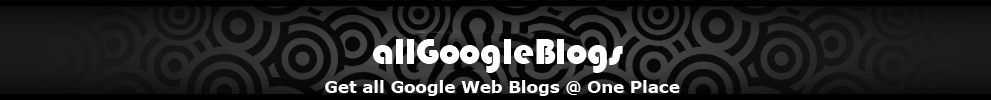
<style>
.page{position:relative;width:991px;height:100px}
.page>*{position:absolute;margin:0}
.t1{font:37.5px "Bauhaus93";color:#ffffff}
.t2{font:16.7px "Verdana-Bold";color:#ffffff}
</style>
<div class="page">
<p class="t1" style="left:373px;top:39px;width:250px;height:34px">allGoogleBlogs</p>
<p class="t2" style="left:325px;top:80px;width:355px;height:16px">Get all Google Web Blogs @ One Place</p>
</div>
